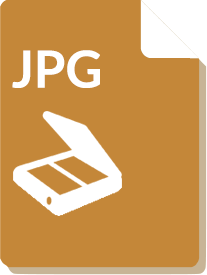
<style>
.page{position:relative;width:207px;height:275px;background:#c48739}
.page>*{position:absolute;margin:0}
.t1{font:51px "Lato-Bold";color:#ffffff}
</style>
<div class="page">
<p class="t1" style="left:12px;top:50px;width:88px;height:38px">JPG</p>
</div>
